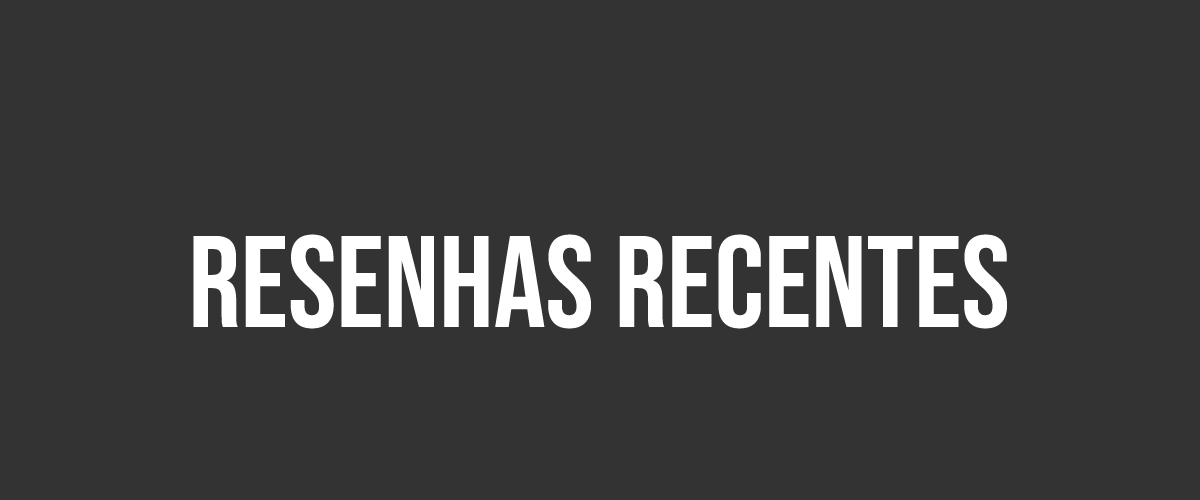
<style>
.page{position:relative;width:1200px;height:500px;background:#333333}
.page>*{position:absolute;margin:0}
.t1{font:130px "BebasNeue-Regular";color:#ffffff}
</style>
<div class="page">
<p class="t1" style="left:193px;top:234px;width:814px;height:95px">Resenhas Recentes</p>
</div>
